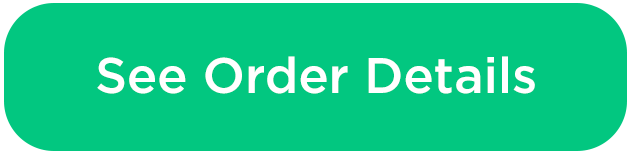
<style>
.page{position:relative;width:630px;height:153px;background:#02c780}
.page>*{position:absolute;margin:0}
.t1{font:50px "Gotham-Medium";color:#ffffff}
</style>
<div class="page">
<p class="t1" style="left:97px;top:56px;width:438px;height:38px">See Order Details</p>
</div>
